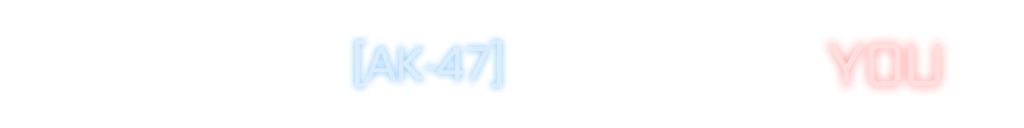
<style>
.page{position:relative;width:1024px;height:128px;background:#ffffff}
.page>*{position:absolute;margin:0}
.t1{font:48px "Purista-Medium";color:#dcedff}
</style>
<div class="page">
<p class="t1" style="left:355px;top:40px;width:147px;height:48px">[AK-47]</p>
<p class="t1" style="left:355px;top:40px;width:147px;height:48px">[AK-47]</p>
</div>
